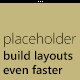
<style>
.page{position:relative;width:80px;height:80px;background:#c4b77d}
.page>*{position:absolute;margin:0}
.t1{font:10px "SegoeUI-Light";color:#ffffff}
.t2{font:12px/16px "SegoeUI-SemiBold";color:#000000}
.t3{font:15px "SegoeUI-Light";color:#000000}
.t4{font:12px "SegoeUI-SemiBold";color:#000000}
</style>
<div class="page">
<p class="t1" style="left:38px;top:1px;width:5px;height:1px">...</p>
<p class="t2" style="left:3px;top:32px;width:73px;height:43px"><span class="t3">placeholder<br></span>build layouts<br><span class="t4">even faster</span></p>
</div>
